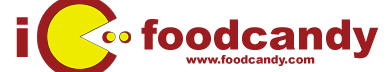
<style>
.page{position:relative;width:390px;height:72px;background:#ffffff}
.page>*{position:absolute;margin:0}
.t1{font:55.5px "Arial-Black";color:#9c1c1f}
.t2{font:42px "Arial-Black";color:#9c1c1f}
.t3{font:11.4px "Arial-Black";color:#9c1c1f}
</style>
<div class="page">
<p class="t1" style="left:16px;top:17px;width:12px;height:40px">i</p>
<p class="t2" style="left:141px;top:19px;width:238px;height:40px">foodcandy</p>
<p class="t3" style="left:186px;top:55px;width:129px;height:11px">www.foodcandy.com</p>
</div>
